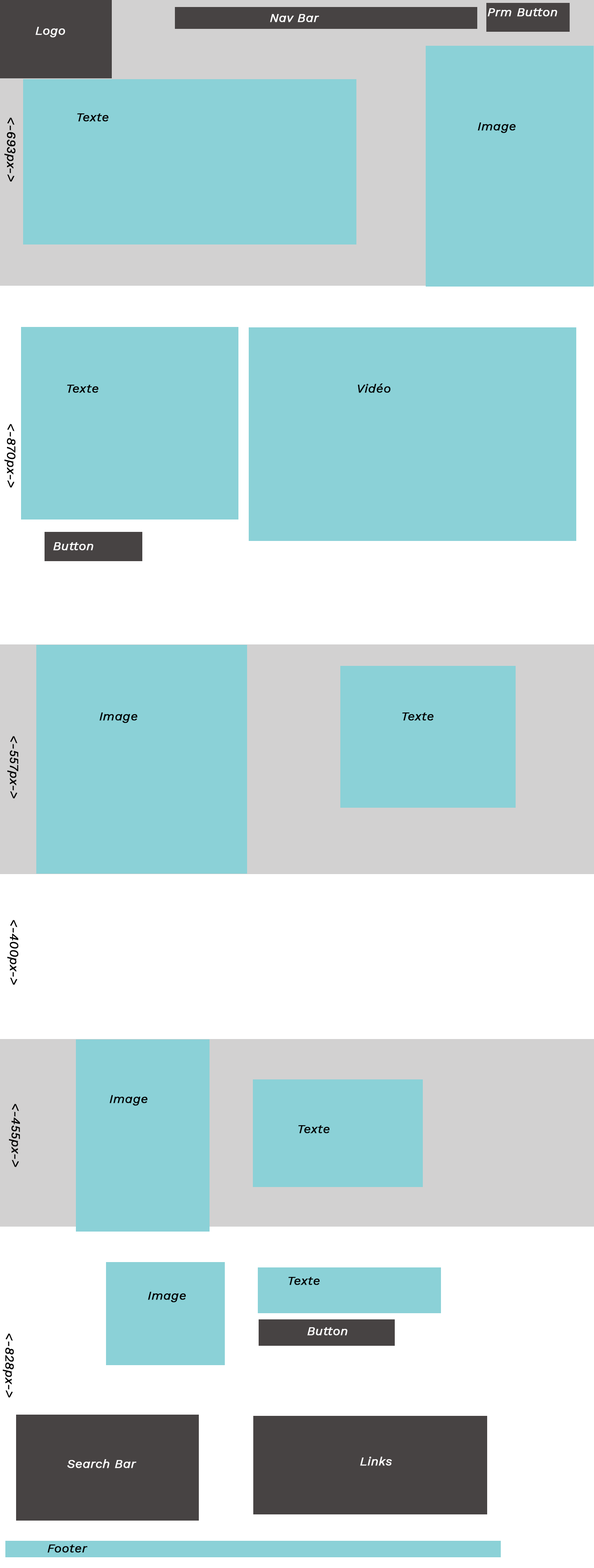
<style>
.page{position:relative;width:594px;height:1568px;background:#8bd1d7}
.page>*{position:absolute;margin:0}
.t1{font:12.4px "WorkSans-Italic";color:#ffffff;font-weight:bold}
.t2{font:12.4px "WorkSans-Italic";color:#000000;font-weight:bold}
</style>
<div class="page">
<p class="t1" style="left:270px;top:14px;width:49px;height:8px">Nav Bar</p>
<p class="t1" style="left:487px;top:8px;width:70px;height:8px">Prm Button</p>
<p class="t1" style="left:35px;top:27px;width:30px;height:11px">Logo</p>
<p class="t2" style="left:77px;top:113px;width:31px;height:9px">Texte</p>
<p class="t2" style="left:4px;top:118px;width:12px;height:64px;rotate:90deg">&lt;-693px-&gt;</p>
<p class="t2" style="left:477px;top:122px;width:38px;height:11px">Image</p>
<p class="t2" style="left:67px;top:385px;width:32px;height:8px">Texte</p>
<p class="t2" style="left:357px;top:383px;width:33px;height:10px">Vidéo</p>
<p class="t2" style="left:4px;top:424px;width:12px;height:64px;rotate:90deg">&lt;-870px-&gt;</p>
<p class="t1" style="left:53px;top:542px;width:40px;height:8px">Button</p>
<p class="t2" style="left:99px;top:712px;width:38px;height:11px">Image</p>
<p class="t2" style="left:402px;top:712px;width:31px;height:9px">Texte</p>
<p class="t2" style="left:7px;top:736px;width:12px;height:63px;rotate:90deg">&lt;-557px-&gt;</p>
<p class="t2" style="left:7px;top:920px;width:12px;height:65px;rotate:90deg">&lt;-400px-&gt;</p>
<p class="t2" style="left:109px;top:1095px;width:39px;height:11px">Image</p>
<p class="t2" style="left:9px;top:1104px;width:11px;height:63px;rotate:90deg">&lt;-455px-&gt;</p>
<p class="t2" style="left:298px;top:1125px;width:31px;height:8px">Texte</p>
<p class="t2" style="left:288px;top:1277px;width:32px;height:8px">Texte</p>
<p class="t2" style="left:148px;top:1292px;width:38px;height:10px">Image</p>
<p class="t2" style="left:2px;top:1333px;width:12px;height:65px;rotate:90deg">&lt;-828px-&gt;</p>
<p class="t1" style="left:307px;top:1327px;width:40px;height:8px">Button</p>
<p class="t1" style="left:360px;top:1457px;width:32px;height:9px">Links</p>
<p class="t1" style="left:67px;top:1459px;width:69px;height:9px">Search Bar</p>
<p class="t2" style="left:47px;top:1544px;width:40px;height:9px">Footer</p>
</div>
